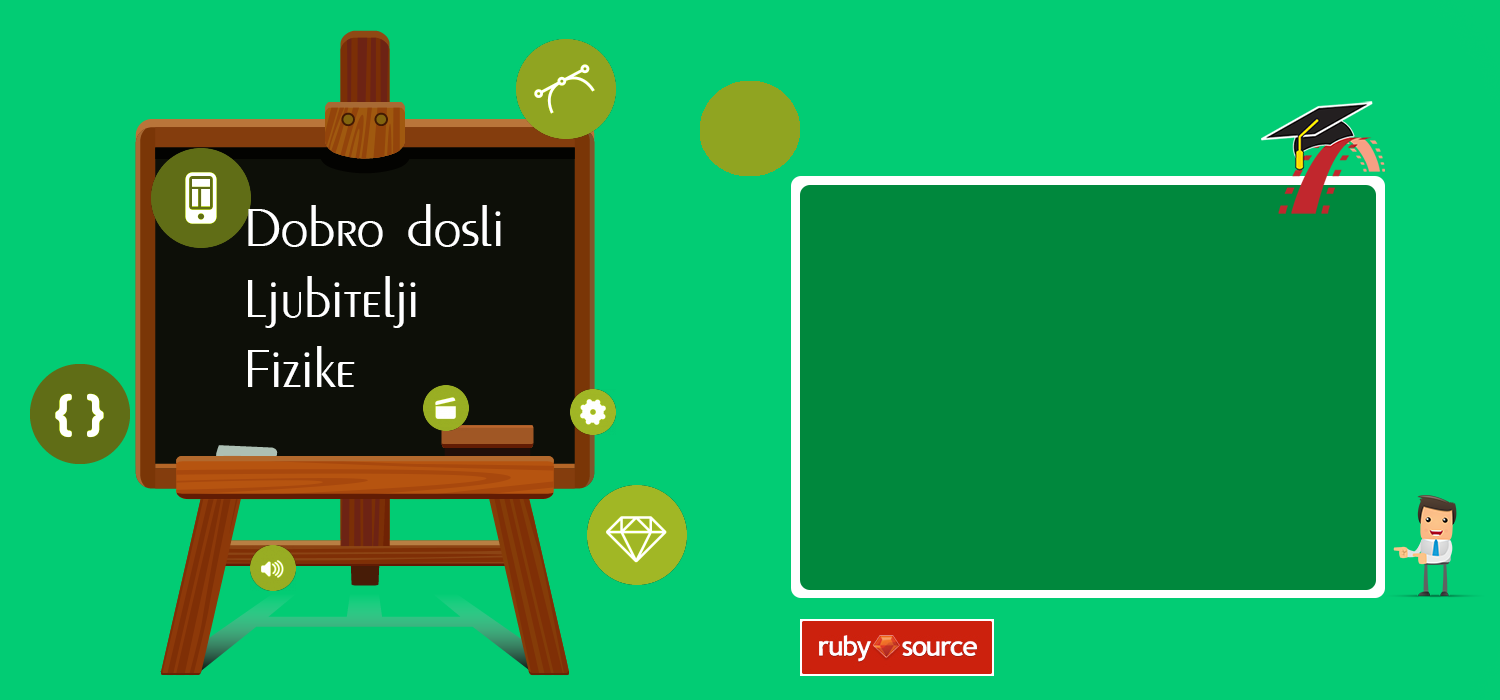
<style>
.page{position:relative;width:1500px;height:700px;background:#02cc74}
.page>*{position:absolute;margin:0}
.t1{font:58.3px "PenguinLightYU";color:#ffffff}
</style>
<div class="page">
<p class="t1" style="left:248px;top:204px;width:253px;height:43px">Dobro dosli</p>
<p class="t1" style="left:248px;top:276px;width:168px;height:111px">Ljubitelji<br>Fizike</p>
</div>
